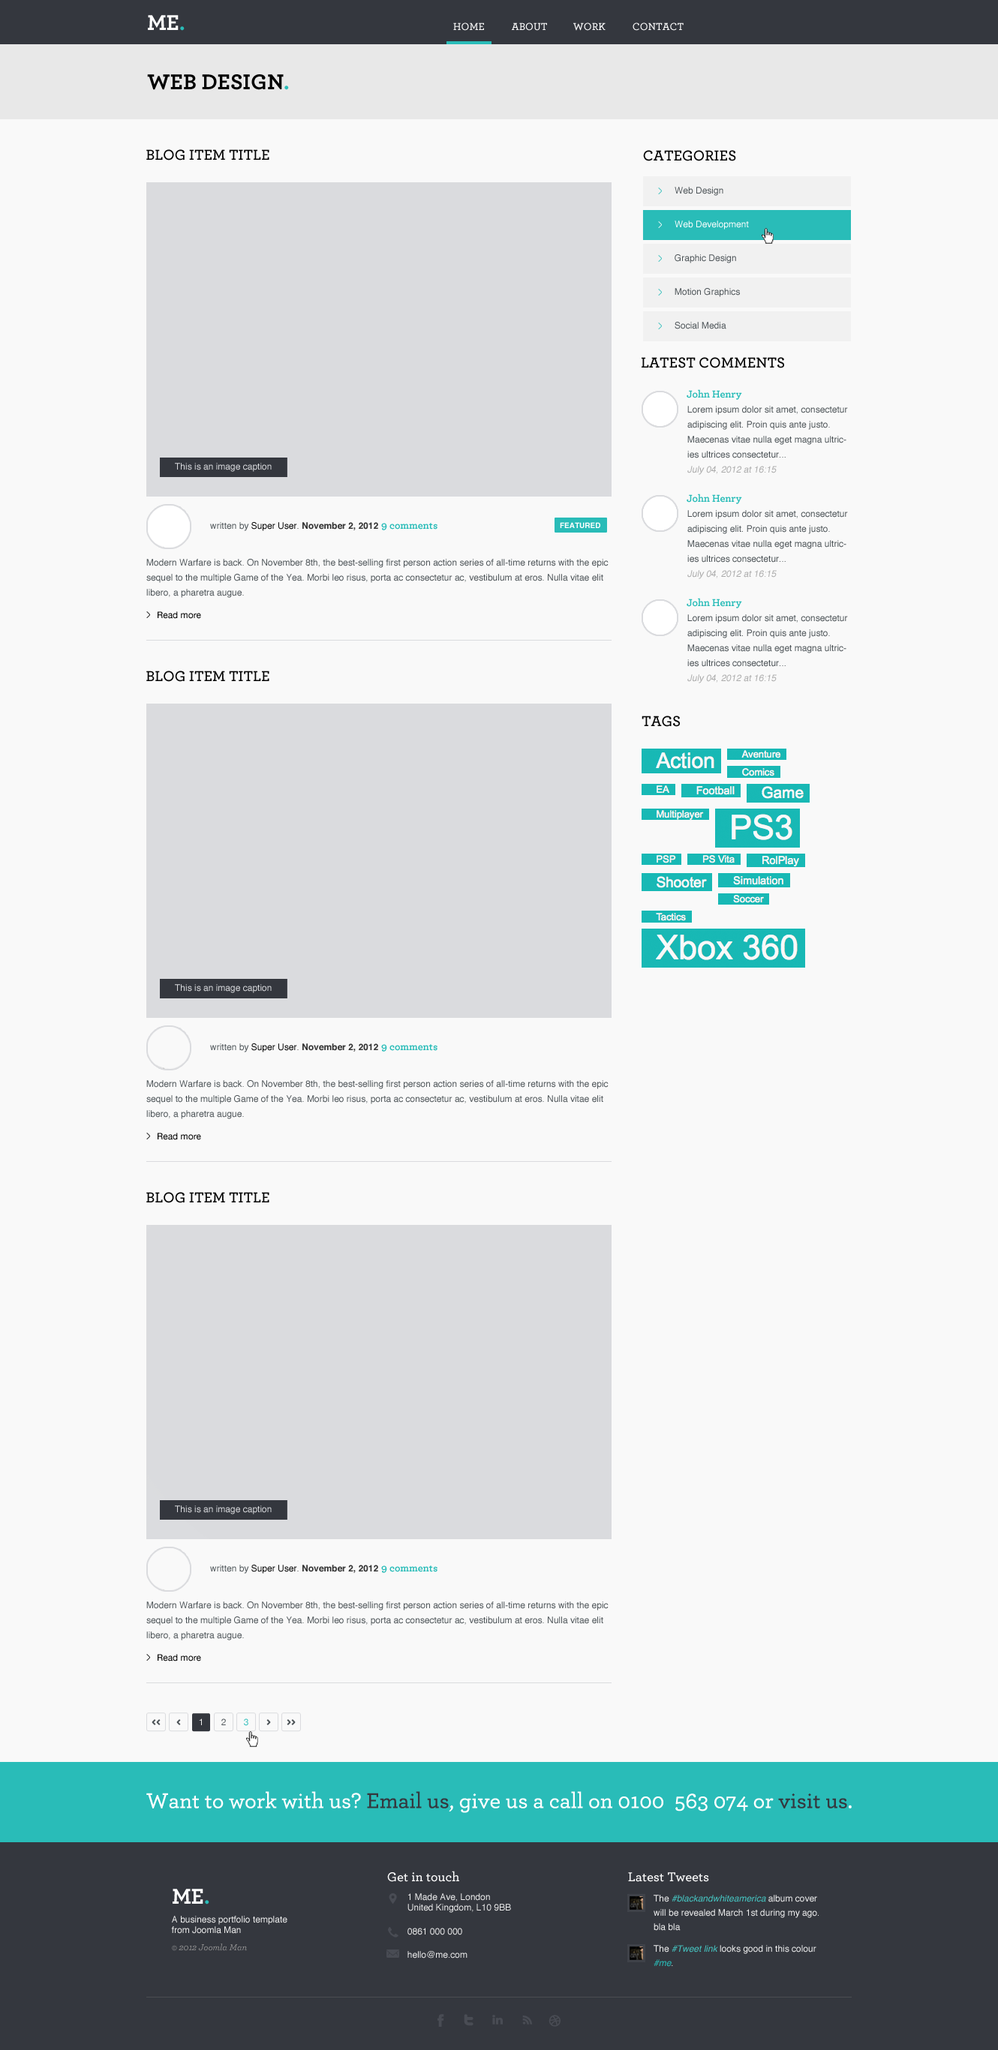
<style>
.page{position:relative;width:998px;height:2050px;background:#f9f9f9}
.page>*{position:absolute;margin:0}
.t1{font:22.5px "Archer-Bold";color:#ffffff;text-transform:uppercase}
.t2{font:22.5px "Archer-Bold";color:#29bcb8;text-transform:uppercase}
.t3{font:10.5px "Archer-Semibold";color:#ffffff;text-transform:uppercase}
.t4{font:22.5px "Archer-Bold";color:#000000;text-transform:uppercase}
.t5{font:15px "Archer-Semibold";color:#000000;text-transform:uppercase}
.t6{font:9px "Helvetica";color:#4c5357}
.t7{font:9px "Helvetica";color:#ffffff}
.t8{font:10.5px "Archer-Bold";color:#29bcb8}
.t9{font:9px/15px "Helvetica";color:#4c5357}
.t10{font:9px "Helvetica";color:#dadbde}
.t11{font:9px "Helvetica";color:#aaaaaa;font-style:italic}
.t12{font:9px "Helvetica-Bold";color:#333333}
.t13{font:9px "Helvetica";color:#000000}
.t14{font:9px "Helvetica";color:#333333}
.t15{font:7.5px "Helvetica-Bold";color:#ffffff}
.t16{font:9px "HelveticaNeue";color:#000000}
.t17{font:9px "HelveticaNeue";color:#f2f2f2}
.t18{font:9px "HelveticaNeue";color:#4c5357}
.t19{font:9px "HelveticaNeue"}
.t20{font:22.4px "Archer-Medium";color:#ffffff}
.t21{font:22.4px "Archer-Medium";color:#34373e}
.t22{font:13.5px "Archer-Semibold";color:#ffffff}
.t23{font:9px "Helvetica";color:#f1f1f1}
.t24{font:9px/14.2px "Helvetica";color:#f1f1f1}
.t25{font:9px/14.2px "Helvetica-Oblique";color:#45c4c1}
.t26{font:9px "Archer-MediumItalic";color:#939393}
.t27{font:9px/14.2px "Helvetica-Oblique";color:#29bcb8}
</style>
<div class="page">
<p class="t1" style="left:148px;top:15px;width:36px;height:16px">ME<span class="t2">.</span></p>
<p class="t3" style="left:453px;top:22px;width:31px;height:9px">Home</p>
<p class="t3" style="left:512px;top:22px;width:35px;height:9px">About</p>
<p class="t3" style="left:573px;top:22px;width:32px;height:9px">WORK</p>
<p class="t3" style="left:632px;top:22px;width:51px;height:9px">Contact</p>
<p class="t4" style="left:147px;top:74px;width:142px;height:16px">Web Design<span class="t2">.</span></p>
<p class="t5" style="left:146px;top:149px;width:123px;height:11px">Blog Item Title</p>
<p class="t5" style="left:643px;top:150px;width:93px;height:11px">Categories</p>
<p class="t6" style="left:674px;top:187px;width:49px;height:9px">Web Design</p>
<p class="t7" style="left:674px;top:220px;width:74px;height:10px">Web Development</p>
<p class="t6" style="left:674px;top:254px;width:62px;height:9px">Graphic Design</p>
<p class="t6" style="left:674px;top:288px;width:66px;height:9px">Motion Graphics</p>
<p class="t6" style="left:674px;top:322px;width:52px;height:7px">Social Media</p>
<p class="t5" style="left:641px;top:357px;width:143px;height:11px">Latest Comments</p>
<p class="t8" style="left:686px;top:389px;width:56px;height:11px">John Henry</p>
<p class="t9" style="left:687px;top:406px;width:161px;height:52px">Lorem ipsum dolor sit amet, consectetur adipiscing elit. Proin quis ante justo. Maecenas vitae nulla eget magna ultricies ultrices consectetur...</p>
<p class="t10" style="left:175px;top:463px;width:97px;height:9px">This is an image caption</p>
<p class="t11" style="left:687px;top:466px;width:89px;height:9px">July 04, 2012 at 16:15</p>
<p class="t8" style="left:686px;top:494px;width:56px;height:10px">John Henry</p>
<p class="t9" style="left:687px;top:510px;width:161px;height:52px">Lorem ipsum dolor sit amet, consectetur adipiscing elit. Proin quis ante justo. Maecenas vitae nulla eget magna ultricies ultrices consectetur...</p>
<p class="t12" style="left:210px;top:522px;width:168px;height:9px"><span class="t6">written by </span><span class="t13">Super User</span><span class="t14">. </span>November 2, 2012</p>
<p class="t8" style="left:381px;top:523px;width:56px;height:7px">9 comments</p>
<p class="t15" style="left:560px;top:522px;width:40px;height:6px">FEATURED</p>
<p class="t9" style="left:146px;top:559px;width:462px;height:39px">Modern Warfare is back. On November 8th, the best-selling first person action series of all-time returns with the epic sequel to the multiple Game of the Yea. Morbi leo risus, porta ac consectetur ac, vestibulum at eros. Nulla vitae elit libero, a pharetra augue.</p>
<p class="t11" style="left:687px;top:570px;width:89px;height:9px">July 04, 2012 at 16:15</p>
<p class="t8" style="left:686px;top:598px;width:56px;height:10px">John Henry</p>
<p class="t16" style="left:158px;top:611px;width:43px;height:8px">Read more</p>
<p class="t9" style="left:687px;top:614px;width:161px;height:53px">Lorem ipsum dolor sit amet, consectetur adipiscing elit. Proin quis ante justo. Maecenas vitae nulla eget magna ultricies ultrices consectetur...</p>
<p class="t5" style="left:146px;top:670px;width:123px;height:12px">Blog Item Title</p>
<p class="t11" style="left:687px;top:674px;width:89px;height:9px">July 04, 2012 at 16:15</p>
<p class="t5" style="left:641px;top:716px;width:39px;height:11px">Tags</p>
<p class="t10" style="left:175px;top:984px;width:97px;height:9px">This is an image caption</p>
<p class="t12" style="left:210px;top:1043px;width:168px;height:9px"><span class="t6">written by </span><span class="t13">Super User</span><span class="t14">. </span>November 2, 2012</p>
<p class="t8" style="left:381px;top:1044px;width:56px;height:8px">9 comments</p>
<p class="t9" style="left:146px;top:1080px;width:462px;height:39px">Modern Warfare is back. On November 8th, the best-selling first person action series of all-time returns with the epic sequel to the multiple Game of the Yea. Morbi leo risus, porta ac consectetur ac, vestibulum at eros. Nulla vitae elit libero, a pharetra augue.</p>
<p class="t16" style="left:158px;top:1132px;width:43px;height:8px">Read more</p>
<p class="t5" style="left:146px;top:1192px;width:123px;height:11px">Blog Item Title</p>
<p class="t10" style="left:175px;top:1505px;width:97px;height:9px">This is an image caption</p>
<p class="t12" style="left:210px;top:1564px;width:168px;height:10px"><span class="t6">written by </span><span class="t13">Super User</span><span class="t14">. </span>November 2, 2012</p>
<p class="t8" style="left:381px;top:1565px;width:56px;height:8px">9 comments</p>
<p class="t9" style="left:146px;top:1601px;width:462px;height:39px">Modern Warfare is back. On November 8th, the best-selling first person action series of all-time returns with the epic sequel to the multiple Game of the Yea. Morbi leo risus, porta ac consectetur ac, vestibulum at eros. Nulla vitae elit libero, a pharetra augue.</p>
<p class="t16" style="left:158px;top:1654px;width:43px;height:7px">Read more</p>
<p class="t17" style="left:199px;top:1718px;width:3px;height:7px">1</p>
<p class="t18" style="left:221px;top:1718px;width:5px;height:7px">2</p>
<p class="t19" style="left:244px;top:1718px;width:4px;height:8px">3</p>
<p class="t20" style="left:146px;top:1791px;width:705px;height:22px">Want to work with us? <span class="t21">Email us</span>, give us a call on 0100  563 074 or <span class="t21">visit us</span>.</p>
<p class="t22" style="left:387px;top:1870px;width:72px;height:12px">Get in touch</p>
<p class="t22" style="left:628px;top:1872px;width:81px;height:10px">Latest Tweets</p>
<p class="t1" style="left:172px;top:1888px;width:37px;height:16px">ME<span class="t2">.</span></p>
<p class="t23" style="left:407px;top:1893px;width:104px;height:19px">1 Made Ave, London<br>United Kingdom, L10 9BB</p>
<p class="t24" style="left:653px;top:1894px;width:165px;height:36px">The <span class="t25">#blackandwhiteamerica </span>album cover will be revealed March 1st during my ago.<br>bla bla</p>
<p class="t23" style="left:171px;top:1916px;width:116px;height:18px">A business portfolio template<br>from Joomla Man</p>
<p class="t23" style="left:407px;top:1928px;width:55px;height:7px">0861 000 000</p>
<p class="t26" style="left:172px;top:1943px;width:75px;height:8px">© 2012 Joomla Man</p>
<p class="t24" style="left:653px;top:1945px;width:163px;height:21px">The <span class="t25">#Tweet link </span>looks good in this colour <span class="t27">#me</span>.</p>
<p class="t23" style="left:407px;top:1951px;width:60px;height:7px">hello@me.com</p>
</div>
